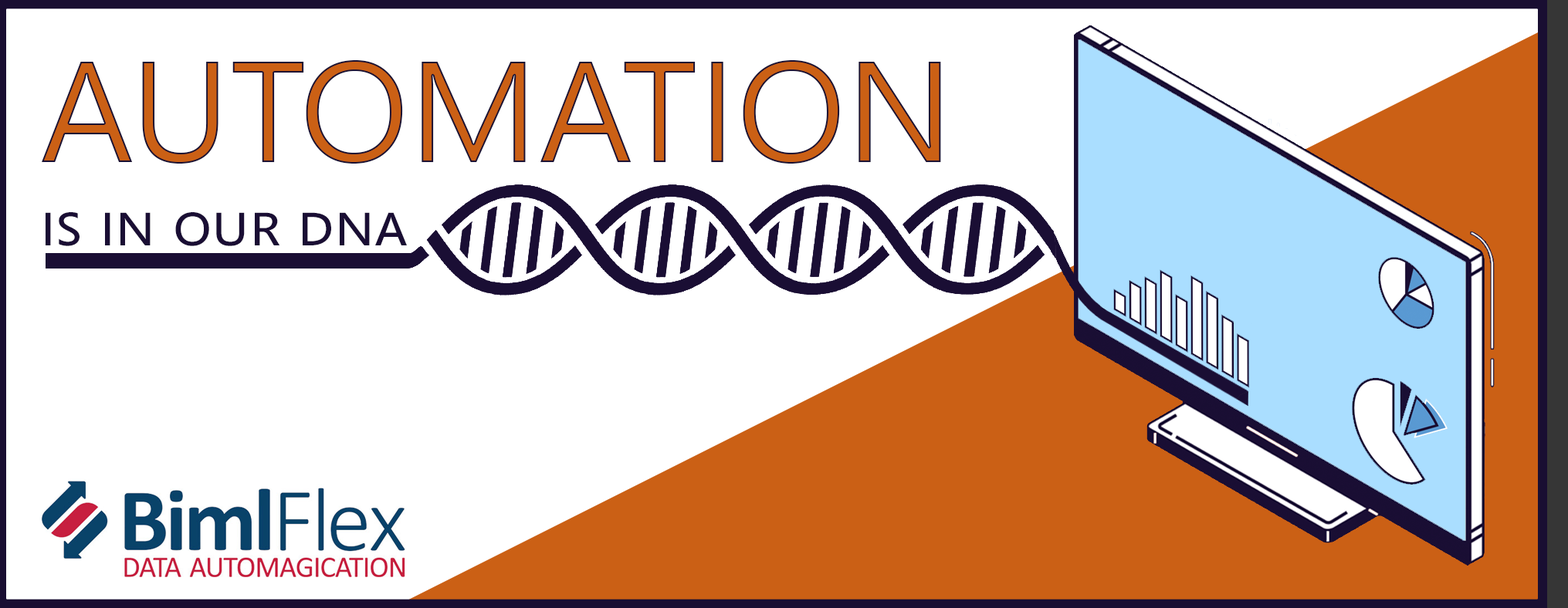
<style>
.page{position:relative;width:1568px;height:608px;background:#ffffff}
.page>*{position:absolute;margin:0}
.t1{font:143.4px "SegoeUI";color:#cb6015;font-variant:small-caps}
.t2{font:62.2px "SegoeUI";color:#1a0e34;font-variant:small-caps}
</style>
<div class="page">
<p class="t1" style="left:42px;top:60px;width:899px;height:104px">AUTOMATION</p>
<p class="t2" style="left:46px;top:212px;width:361px;height:34px">is in our dna</p>
</div>
